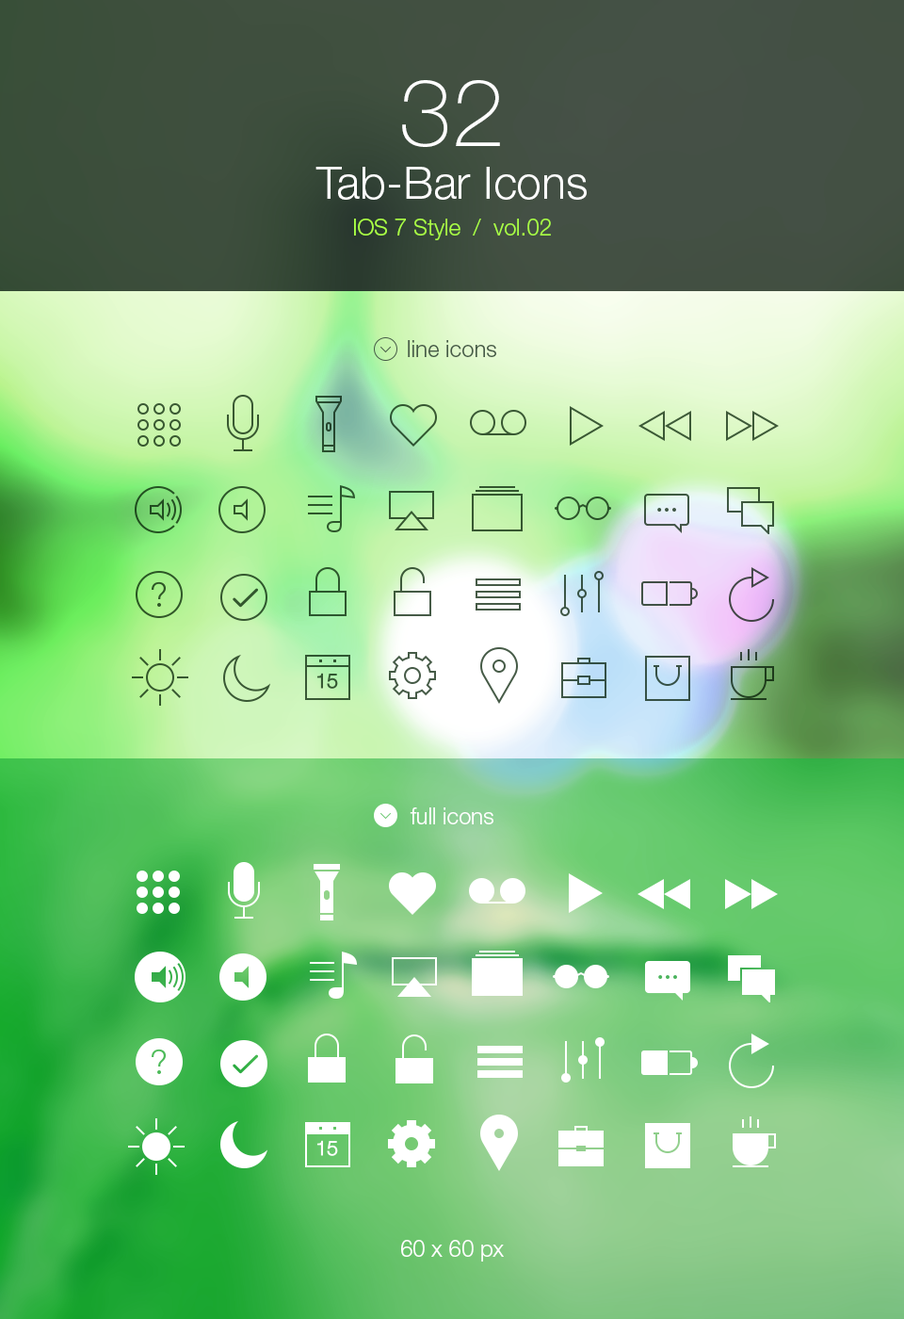
<style>
.page{position:relative;width:904px;height:1319px}
.page>*{position:absolute;margin:0}
.t1{font:22.6px/36.7px "HelveticaNeueLTStd-Lt";color:#a9ff45}
.t2{font:94.2px/47.1px "HelveticaNeueLTStd-Th";color:#ffffff}
.t3{font:45.2px/52.7px "HelveticaNeueLTStd-Lt";color:#ffffff}
.t4{font:22.6px "HelveticaNeueLTStd-Lt";color:#465b47}
.t5{font:22.6px "HelveticaNeueLTStd-Lt";color:#ffffff}
</style>
<div class="page">
<p class="t1" style="left:316px;top:80px;width:271px;height:160px;text-align:center"><span class="t2">32<br></span><span class="t3">Tab-Bar Icons<br></span>IOS 7 Style  /  vol.02</p>
<p class="t4" style="left:408px;top:340px;width:88px;height:17px">line icons</p>
<p class="t5" style="left:410px;top:807px;width:84px;height:17px">full icons</p>
<p class="t5" style="left:401px;top:1240px;width:103px;height:21px">60 x 60 px</p>
</div>
